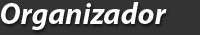
<style>
.page{position:relative;width:200px;height:35px;background:#333333}
.page>*{position:absolute;margin:0}
.t1{font:30px "MyriadPro-BoldIt";color:#ffffff}
</style>
<div class="page">
<p class="t1" style="left:1px;top:2px;width:166px;height:28px">Organizador</p>
</div>
